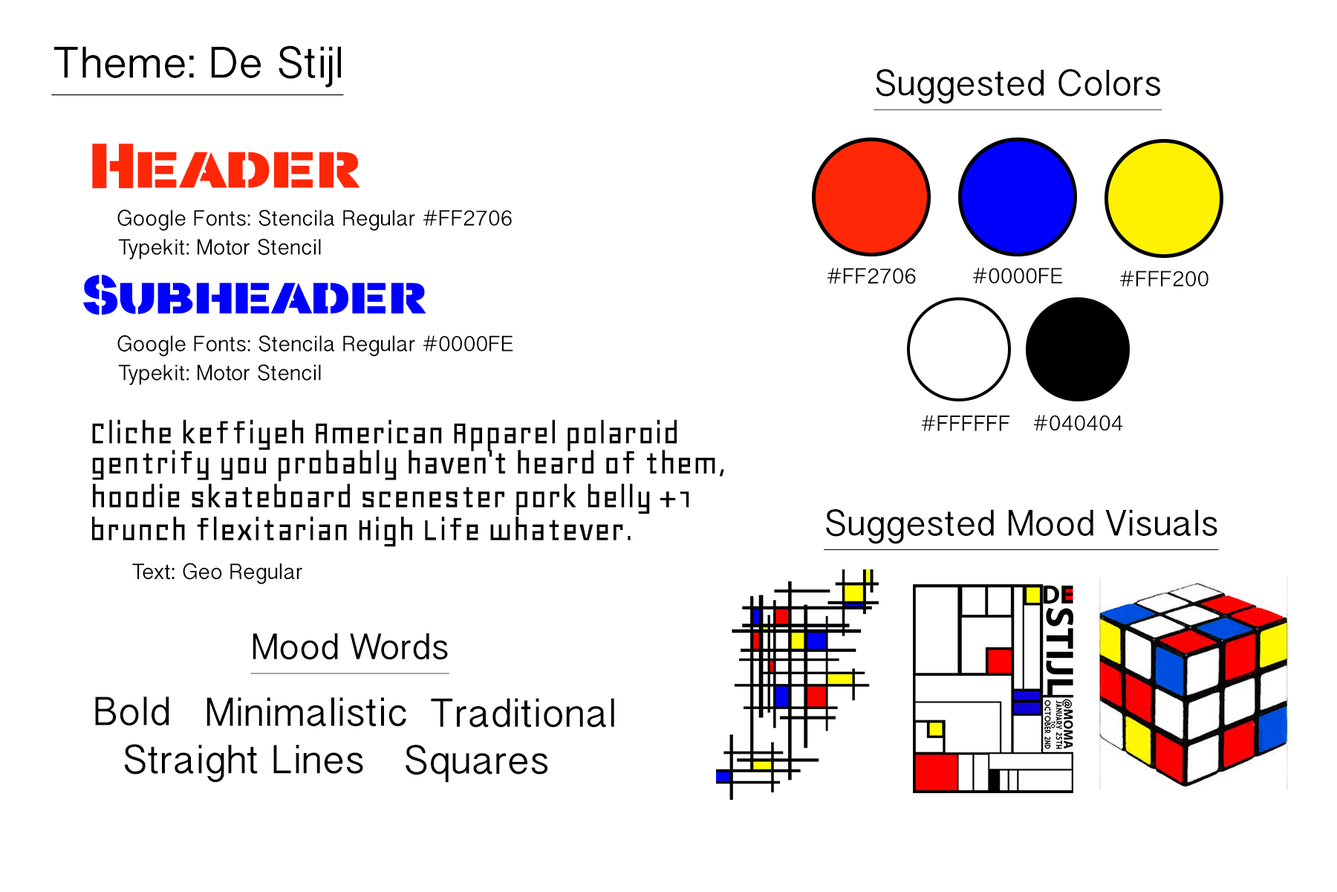
<style>
.page{position:relative;width:1337px;height:892px;background:#ffffff}
.page>*{position:absolute;margin:0}
.t1{font:44.6px "MyanmarSangamMN";color:#000000;text-decoration:underline}
.t2{font:37.2px "MyanmarSangamMN";color:#000000;text-decoration:underline}
.t3{font:52px "stencilla";color:#ff2706}
.t4{font:22.3px "MyanmarSangamMN";color:#000000}
.t5{font:22.3px "MyanmarSangamMN";color:#020202}
.t6{font:44.6px "stencilla";color:#0000fe}
.t7{font:22.3px "MyanmarSangamMN";color:#040404}
.t8{font:35.7px "Geo-Regular";color:#000000}
.t9{font:40.9px "MyanmarSangamMN";color:#000000}
</style>
<div class="page">
<p class="t1" style="left:51px;top:45px;width:293px;height:51px">Theme: De Stijl</p>
<p class="t2" style="left:874px;top:69px;width:289px;height:42px">Suggested Colors</p>
<p class="t3" style="left:92px;top:143px;width:268px;height:46px">Header</p>
<p class="t4" style="left:117px;top:210px;width:395px;height:21px">Google Fonts: Stencila Regular #FF2706</p>
<p class="t4" style="left:118px;top:239px;width:203px;height:20px">Typekit: Motor Stencil</p>
<p class="t4" style="left:828px;top:267px;width:88px;height:17px">#FF2706</p>
<p class="t5" style="left:973px;top:267px;width:89px;height:17px">#0000FE</p>
<p class="t6" style="left:83px;top:274px;width:343px;height:41px">Subheader</p>
<p class="t7" style="left:1120px;top:270px;width:89px;height:17px">#FFF200</p>
<p class="t4" style="left:117px;top:335px;width:396px;height:22px">Google Fonts: Stencila Regular #0000FE</p>
<p class="t4" style="left:118px;top:364px;width:203px;height:21px">Typekit: Motor Stencil</p>
<p class="t8" style="left:92px;top:419px;width:585px;height:32px">Cliche keffiyeh American Apparel polaroid</p>
<p class="t7" style="left:921px;top:415px;width:89px;height:16px">#FFFFFF</p>
<p class="t7" style="left:1034px;top:415px;width:89px;height:16px">#040404</p>
<p class="t8" style="left:92px;top:450px;width:632px;height:31px">gentrify you probably haven't heard of them,</p>
<p class="t8" style="left:93px;top:483px;width:597px;height:32px">hoodie skateboard scenester pork belly +1</p>
<p class="t2" style="left:824px;top:509px;width:395px;height:41px">Suggested Mood Visuals</p>
<p class="t8" style="left:92px;top:516px;width:539px;height:31px">brunch flexitarian High Life whatever.</p>
<p class="t4" style="left:132px;top:562px;width:170px;height:22px">Text: Geo Regular</p>
<p class="t2" style="left:250px;top:633px;width:200px;height:41px">Mood Words</p>
<p class="t9" style="left:95px;top:696px;width:74px;height:29px">Bold</p>
<p class="t9" style="left:207px;top:697px;width:199px;height:29px">Minimalistic</p>
<p class="t9" style="left:431px;top:698px;width:183px;height:29px">Traditional</p>
<p class="t9" style="left:124px;top:744px;width:239px;height:38px">Straight Lines</p>
<p class="t9" style="left:406px;top:744px;width:142px;height:38px">Squares</p>
</div>
